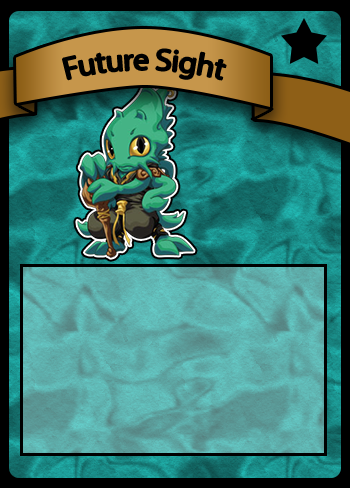
<style>
.page{position:relative;width:350px;height:488px}
.page>*{position:absolute;margin:0}
.t1{font:30px "MyriadPro-Regular";color:#000000}
</style>
<div class="page">
<p class="t1" style="left:63px;top:49px;width:163px;height:31px">Future Sight</p>
</div>
